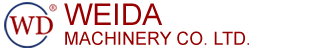
<style>
.page{position:relative;width:330px;height:50px;background:#ffffff}
.page>*{position:absolute;margin:0}
.t1{font:18px/30px "ArialMT";color:#960000;text-transform:uppercase}
.t2{font:30px/30px "ArialMT";color:#960000;text-transform:uppercase}
</style>
<div class="page">
<p class="t1" style="left:64px;top:3px;width:185px;height:42px"><span class="t2">weida<br></span>Machinery Co. Ltd.</p>
</div>
